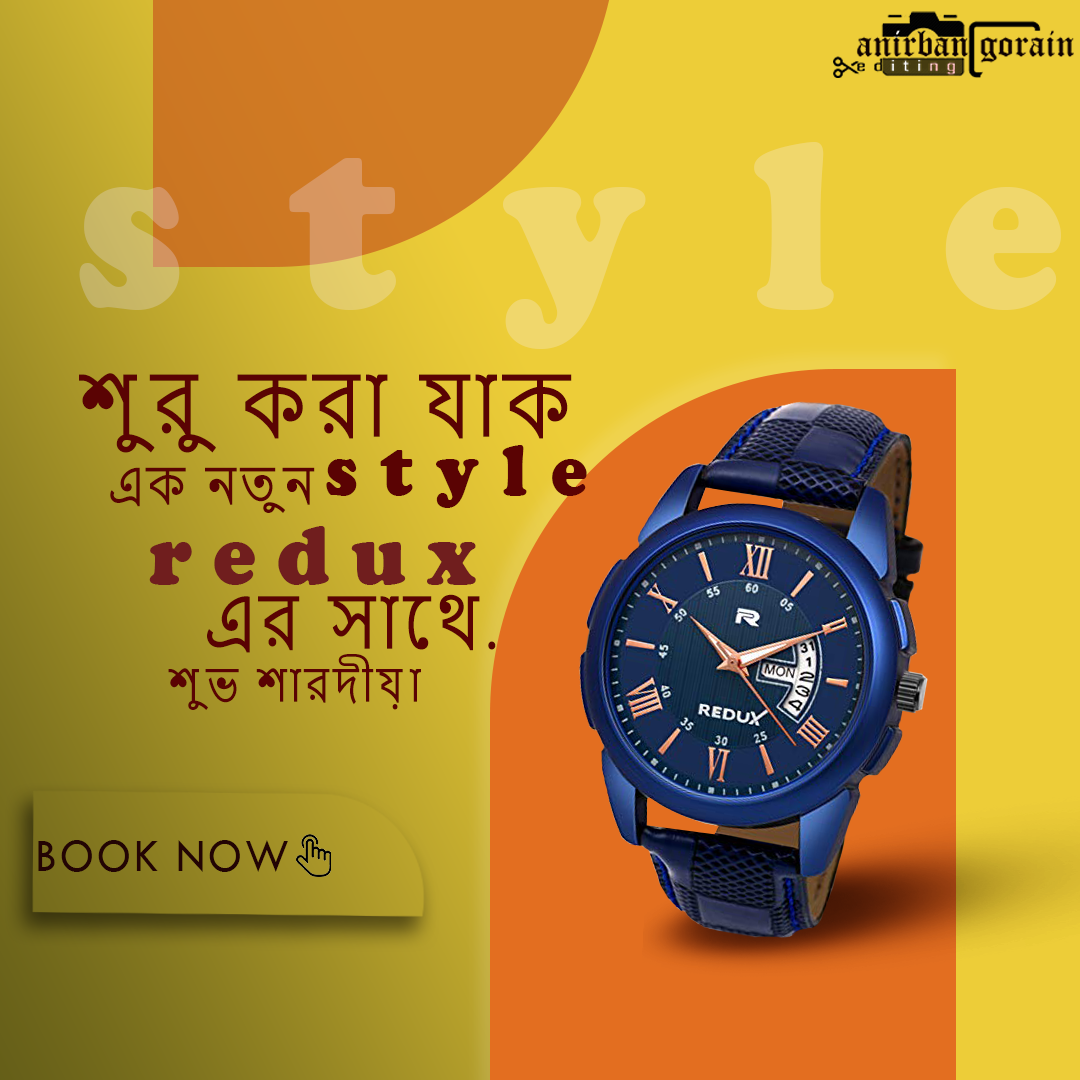
<style>
.page{position:relative;width:1080px;height:1080px}
.page>*{position:absolute;margin:0}
.t1{font:247px "CooperBlack";letter-spacing:0.46em;scale:0.93 1}
.t2{font:85.5px "NirmalaUI";letter-spacing:0.1em;color:#5a0303;scale:0.89 1}
.t3{font:73.7px "CooperBlack";letter-spacing:0.34em;color:#5a0303;scale:0.93 1}
.t4{font:49.5px "NirmalaUI";letter-spacing:0.1em;color:#5a0303;scale:0.89 1}
.t5{font:86.7px "CooperBlack";letter-spacing:0.26em;color:#701e1e;scale:0.93 1}
.t6{font:72px "NirmalaUI";letter-spacing:0.1em;color:#5a0303;scale:0.89 1}
.t7{font:45px "NirmalaUI";letter-spacing:0.1em;color:#5a0303;scale:0.89 1}
.t8{font:47.7px "TwCenMT-Regular";letter-spacing:0.06em;color:#230404;scale:0.93 1}
</style>
<div class="page">
<p class="t1" style="left:79px;top:142px;width:982px;height:207px">style</p>
<p class="t2" style="left:79px;top:373px;width:493px;height:80px">শুরু করা যাক</p>
<p class="t3" style="left:326px;top:445px;width:261px;height:63px">style</p>
<p class="t4" style="left:110px;top:467px;width:205px;height:46px">এক নতুন</p>
<p class="t5" style="left:149px;top:526px;width:327px;height:59px">redux</p>
<p class="t6" style="left:207px;top:594px;width:289px;height:59px">এর সােথ.</p>
<p class="t7" style="left:168px;top:654px;width:253px;height:56px">শুভ শারদীয়া</p>
<p class="t8" style="left:38px;top:840px;width:250px;height:32px">BOOK NOW</p>
</div>
